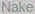
<style>
.page{position:relative;width:35px;height:14px}
.page>*{position:absolute;margin:0}
.t1{font:14px "Helvetica"}
</style>
<div class="page">
<p class="t1" style="left:2px;top:2px;width:31px;height:10px">Nake</p>
</div>
